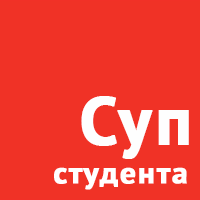
<style>
.page{position:relative;width:200px;height:200px;background:#f03226}
.page>*{position:absolute;margin:0}
.t1{font:66.7px "PTSans-Bold";letter-spacing:0.04em;color:#fefefe;font-weight:bold}
.t2{font:29.8px "PTSans-Bold";letter-spacing:0.04em;color:#ffffff;font-weight:bold;scale:1.05 1}
</style>
<div class="page">
<p class="t1" style="left:81px;top:96px;width:108px;height:63px">Суп</p>
<p class="t2" style="left:54px;top:167px;width:133px;height:23px">студента</p>
</div>
